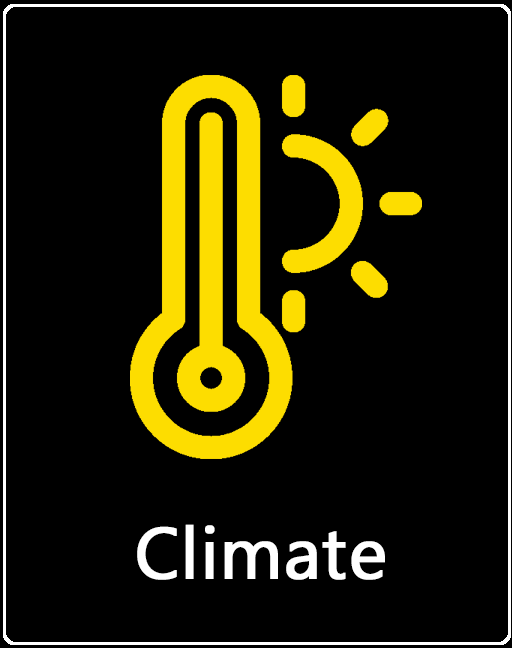
<style>
.page{position:relative;width:512px;height:648px;background:#000000}
.page>*{position:absolute;margin:0}
.t1{font:72px "Gadugi";color:#ffffff;font-weight:bold}
</style>
<div class="page">
<p class="t1" style="left:137px;top:524px;width:248px;height:56px">Climate</p>
</div>
